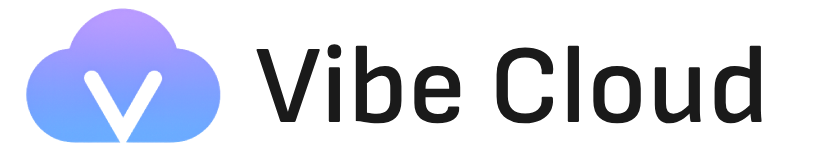
<style>
.page{position:relative;width:840px;height:151px;background:#ffffff}
.page>*{position:absolute;margin:0}
.t1{font:111.6px "SofiaSans-SemiBold";color:#1a1a1a}
</style>
<div class="page">
<p class="t1" style="left:256px;top:44px;width:506px;height:80px">Vibe Cloud</p>
</div>
